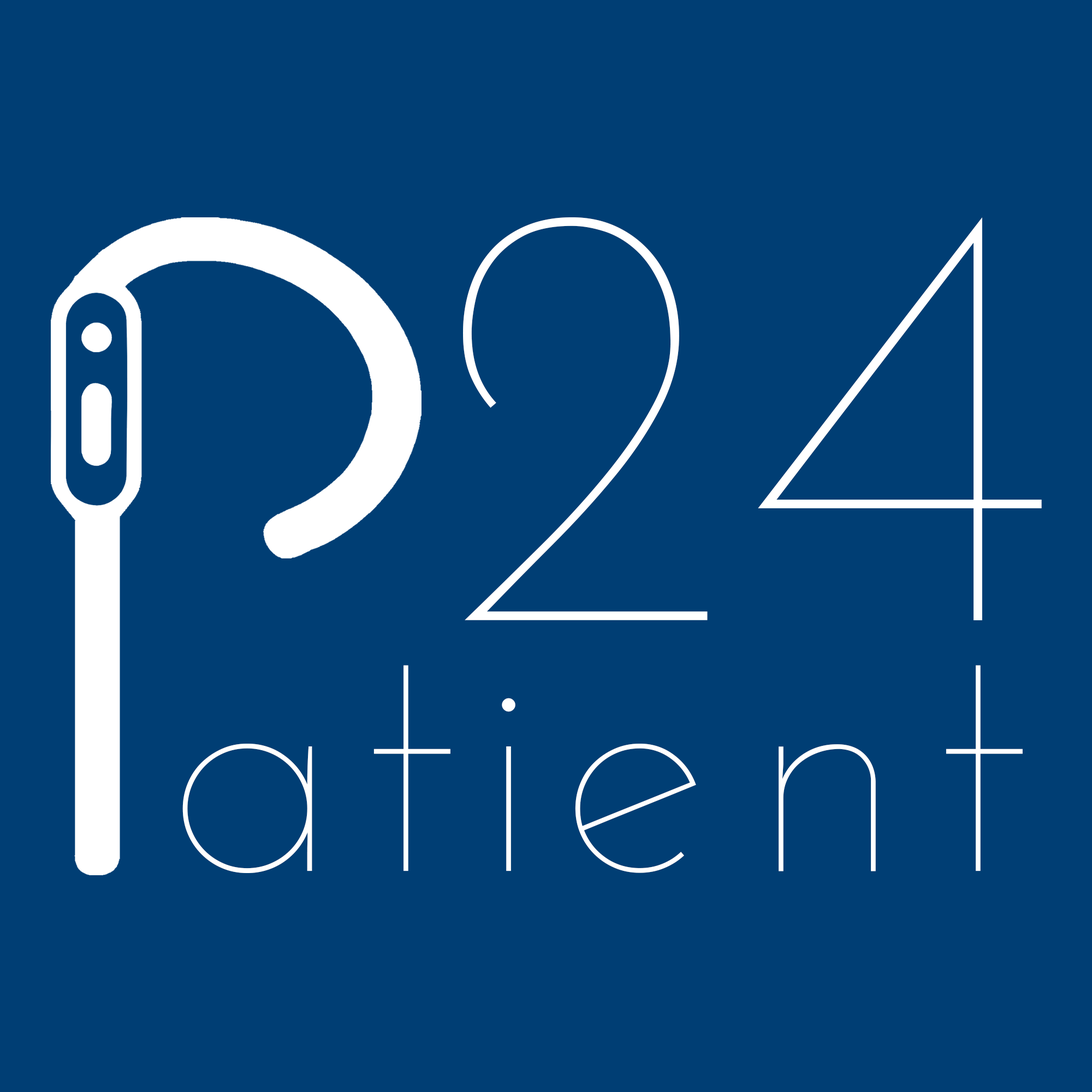
<style>
.page{position:relative;width:1092px;height:1092px;background:#003e74}
.page>*{position:absolute;margin:0}
.t1{font:612px "JosefinSans-Thin";color:#ffffff}
.t2{font:332.1px "JosefinSans-Thin";letter-spacing:0.08em;color:#ffffff}
</style>
<div class="page">
<p class="t1" style="left:463px;top:217px;width:579px;height:403px">24</p>
<p class="t2" style="left:182px;top:665px;width:841px;height:208px">atient</p>
</div>
